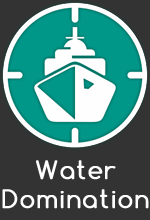
<style>
.page{position:relative;width:150px;height:220px;background:#333333}
.page>*{position:absolute;margin:0}
.t1{font:24.1px "Comfortaa-Regular";letter-spacing:0.05em;color:#fefefe;font-weight:bold}
</style>
<div class="page">
<p class="t1" style="left:2px;top:160px;width:147px;height:49px;text-align:center">Water<br>Domination</p>
</div>
